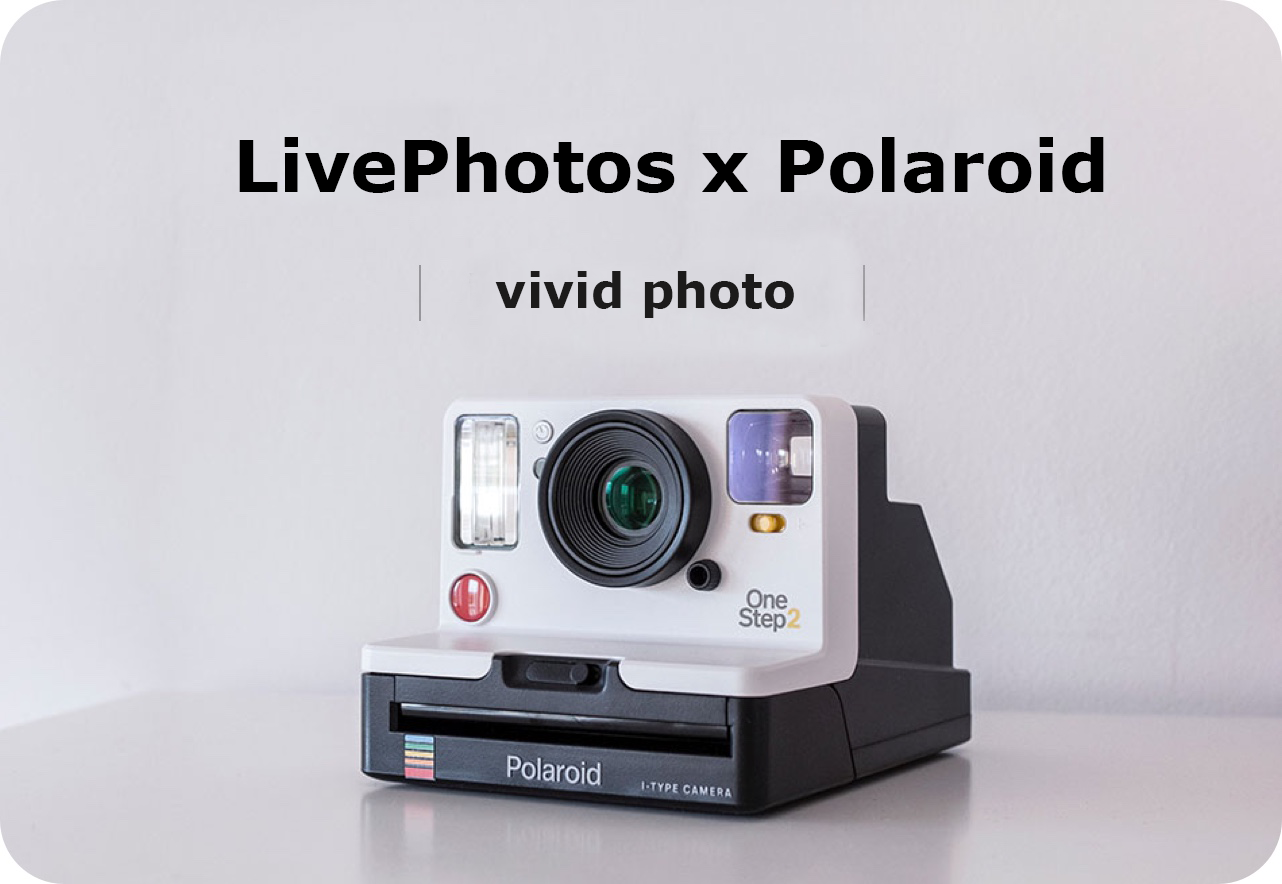
<style>
.page{position:relative;width:1282px;height:884px}
.page>*{position:absolute;margin:0}
.t1{font:72px "Verdana-Bold";color:#000000}
.t2{font:48px "Verdana-Bold";color:#1c1b1b}
</style>
<div class="page">
<p class="t1" style="left:239px;top:137px;width:865px;height:56px">LivePhotos x Polaroid</p>
<p class="t2" style="left:495px;top:271px;width:299px;height:47px">vivid photo</p>
</div>
